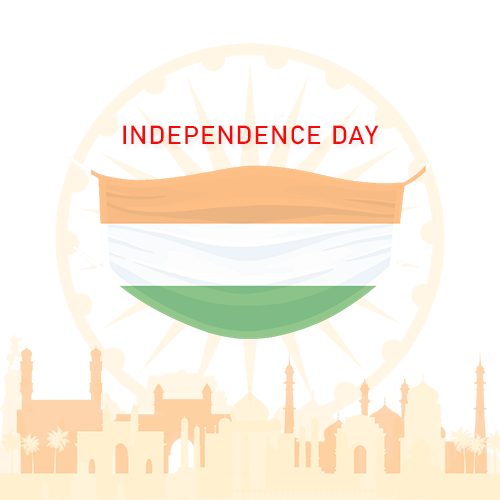
<style>
.page{position:relative;width:500px;height:500px;background:#ffffff}
.page>*{position:absolute;margin:0}
.t1{font:26px "Bahnschrift";letter-spacing:0.04em;color:#f50a0a;text-transform:uppercase}
</style>
<div class="page">
<p class="t1" style="left:123px;top:125px;width:256px;height:20px">INdependence day</p>
</div>
